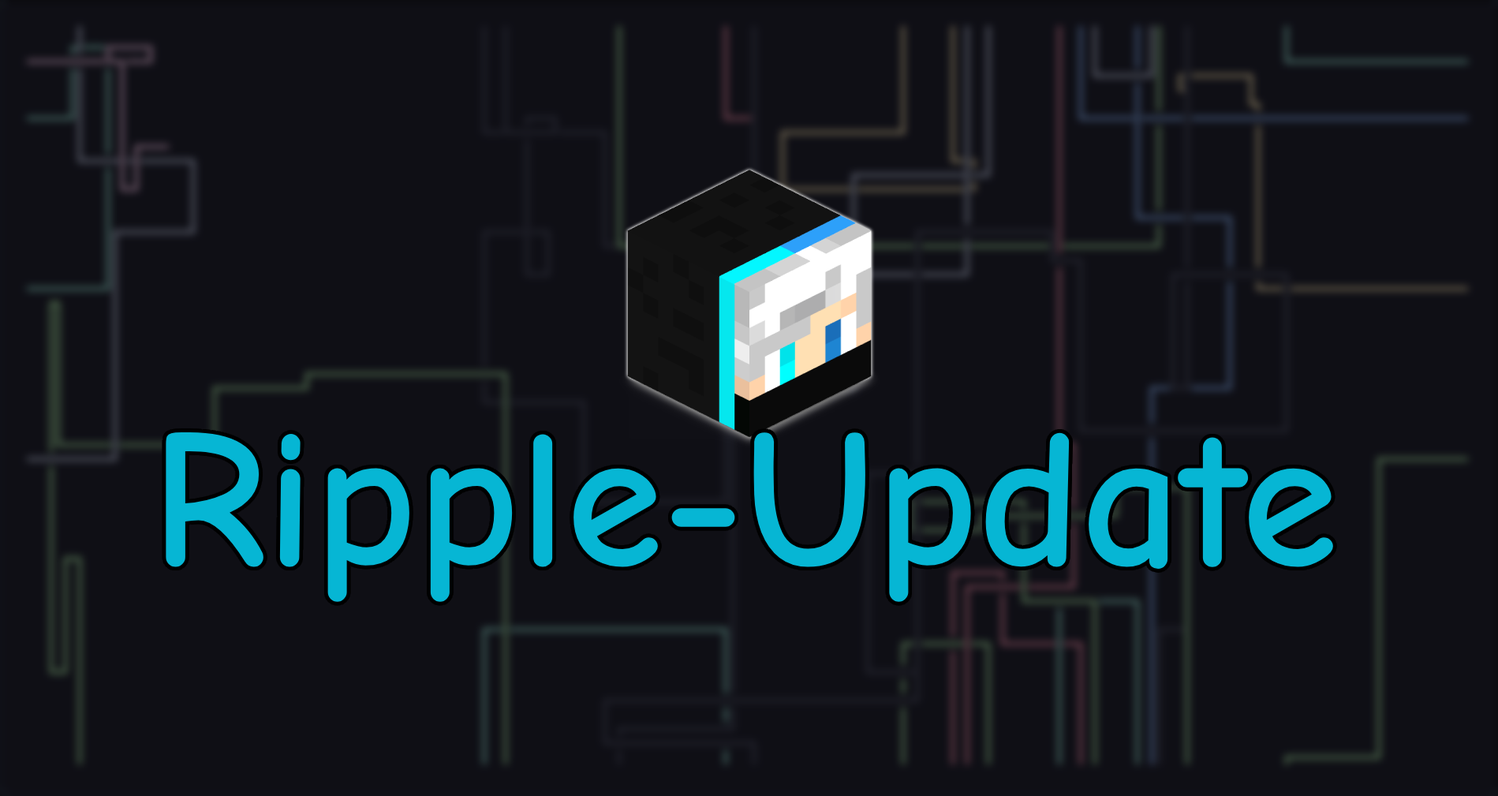
<style>
.page{position:relative;width:1498px;height:796px;background:#0f0f15}
.page>*{position:absolute;margin:0}
.t1{font:197.2px "ComicNeue-Bold";color:#06b6d4}
</style>
<div class="page">
<p class="t1" style="left:166px;top:432px;width:1167px;height:170px">Ripple-Update</p>
</div>
